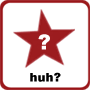
<style>
.page{position:relative;width:90px;height:90px;background:#ffffff}
.page>*{position:absolute;margin:0}
.t1{font:20.8px "Arial-Black";color:#ffffff}
.t2{font:11.9px "Arial-Black";color:#000000}
</style>
<div class="page">
<p class="t1" style="left:38px;top:34px;width:12px;height:16px">?</p>
<p class="t2" style="left:30px;top:72px;width:31px;height:10px">huh?</p>
</div>
